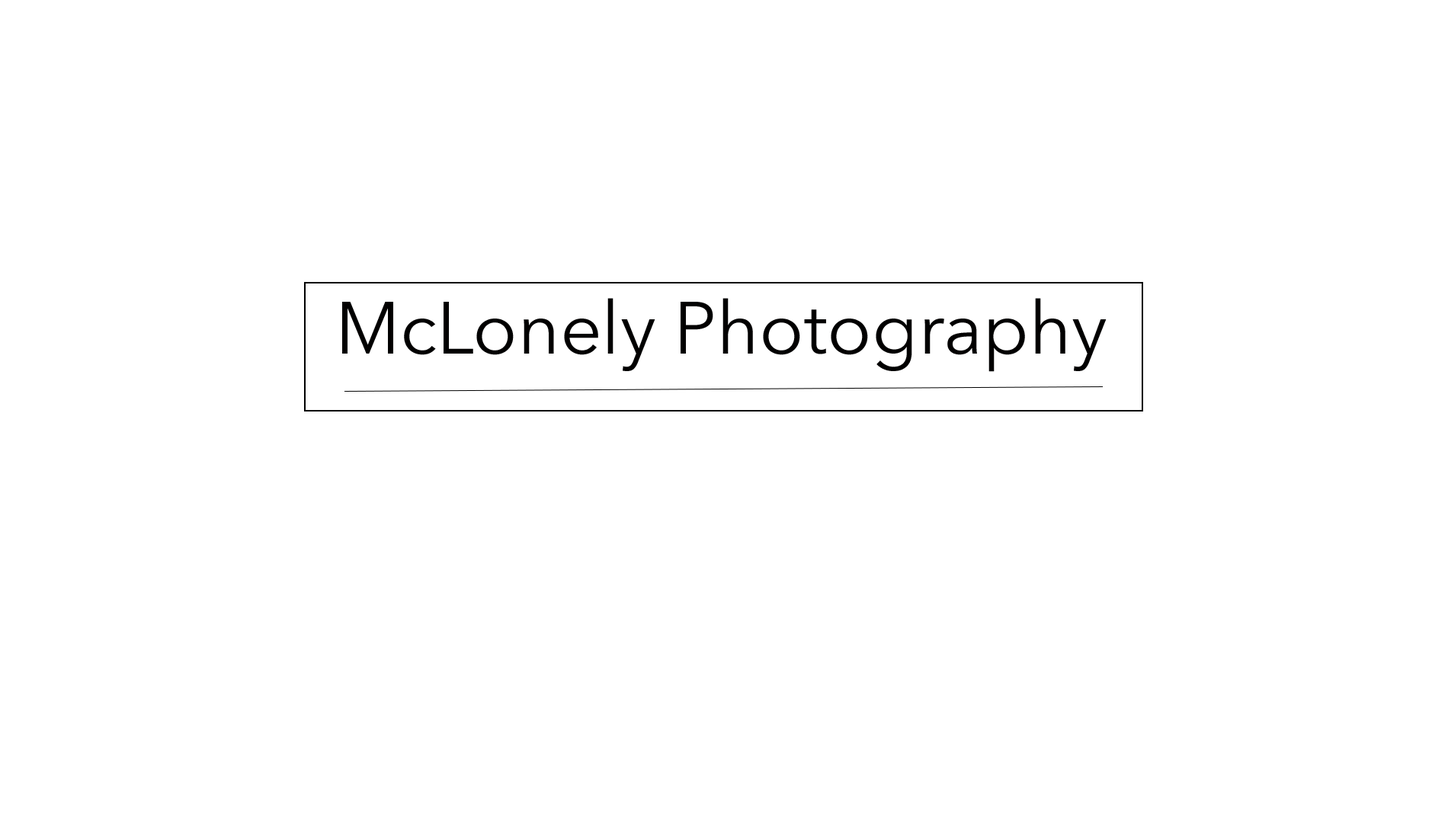
<style>
.page{position:relative;width:1448px;height:823px;background:#ffffff}
.page>*{position:absolute;margin:0}
.t1{font:73.2px "AvenirNext-Regular";color:#010000}
</style>
<div class="page">
<p class="t1" style="left:342px;top:298px;width:765px;height:74px">McLonely Photography</p>
</div>
